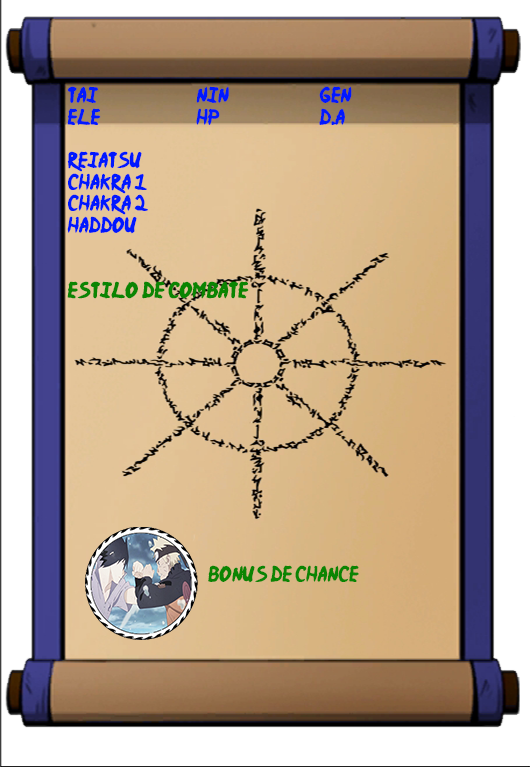
<style>
.page{position:relative;width:530px;height:767px}
.page>*{position:absolute;margin:0}
.t1{font:18px "Ninja-Naruto";color:#0018ff}
.t2{font:18px "Ninja-Naruto";color:#0b8502;font-weight:bold}
.t3{font:18px "Ninja-Naruto";color:#0b8502}
</style>
<div class="page">
<p class="t1" style="left:67px;top:86px;width:285px;height:213px">Tai         Nin   Gen<br>Ele         hp   d.a<br>  <br>rEIATSU<br>cHAKRA 1<br>cHAKRA 2<br>hADDOU<br><br><br><span class="t2">eSTILO DE COMBATE</span></p>
<p class="t3" style="left:208px;top:565px;width:151px;height:18px">bONUS DE cHANCE</p>
</div>
